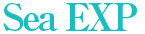
<style>
.page{position:relative;width:145px;height:34px;background:#ffffff}
.page>*{position:absolute;margin:0}
.t1{font:37px "RyuminPro-ExBold";letter-spacing:-0.08em;color:#1cbdc0}
</style>
<div class="page">
<p class="t1" style="left:3px;top:3px;width:134px;height:28px">Sea EXP</p>
</div>
